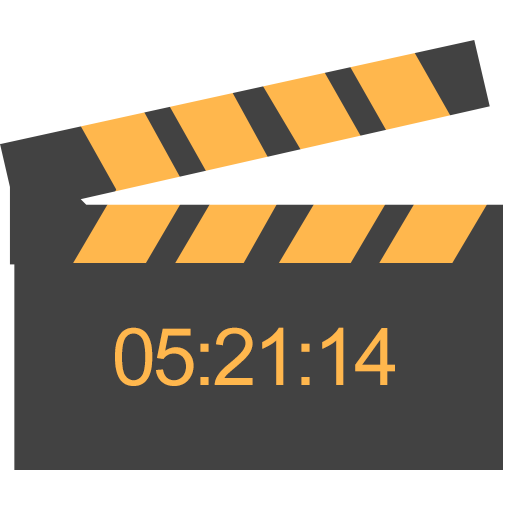
<style>
.page{position:relative;width:512px;height:512px;background:#424242}
.page>*{position:absolute;margin:0}
.t1{font:79.4px "ArialMT";letter-spacing:-0.04em;color:#ffb74d}
</style>
<div class="page">
<p class="t1" style="left:115px;top:327px;width:280px;height:59px">05:21:14</p>
</div>
